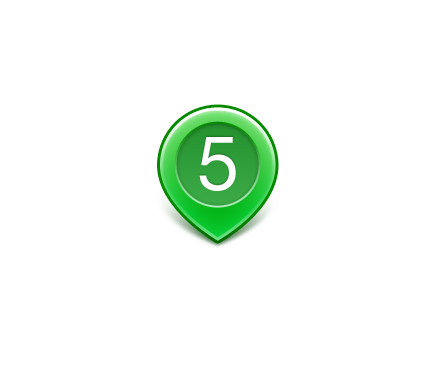
<style>
.page{position:relative;width:426px;height:371px;background:#ffffff}
.page>*{position:absolute;margin:0}
.t1{font:76px "HelveticaNeue";color:#ffffff}
</style>
<div class="page">
<p class="t1" style="left:199px;top:137px;width:37px;height:54px">5</p>
</div>
